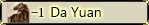
<style>
.page{position:relative;width:149px;height:25px;background:#d9d5bd}
.page>*{position:absolute;margin:0}
.t1{font:14px "LaoUI";color:#000000}
</style>
<div class="page">
<p class="t1" style="left:51px;top:7px;width:50px;height:10px">Da Yuan</p>
</div>
